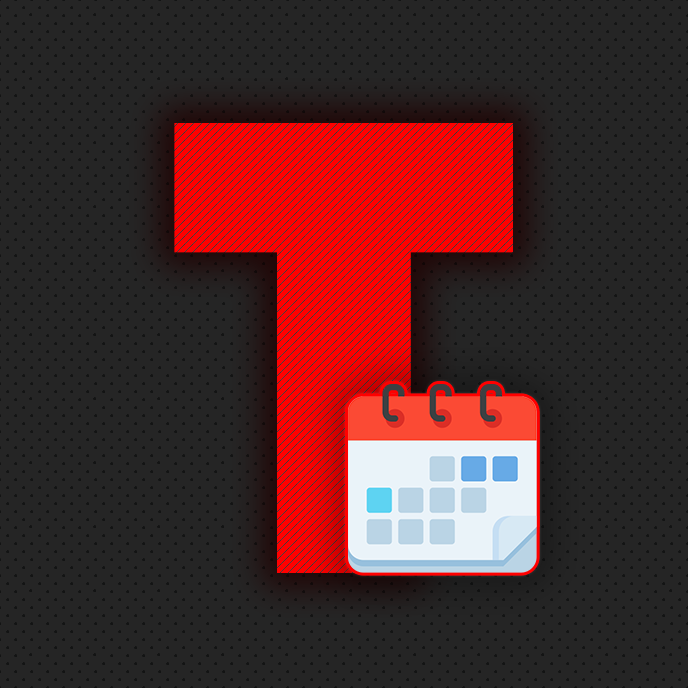
<style>
.page{position:relative;width:688px;height:688px;background:#252525}
.page>*{position:absolute;margin:0}
.t1{font:675px "Bauhaus93";color:#ff0000}
</style>
<div class="page">
<p class="t1" style="left:174px;top:123px;width:339px;height:450px">T</p>
</div>
